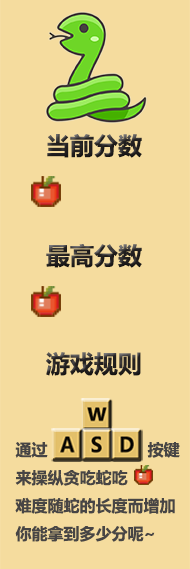
<style>
.page{position:relative;width:190px;height:569px;background:#f5dc9e}
.page>*{position:absolute;margin:0}
.t1{font:24px "MicrosoftYaHei-Bold";color:#242121}
.t2{font:16px "MicrosoftYaHei-Bold";color:#474545}
</style>
<div class="page">
<p class="t1" style="left:47px;top:134px;width:95px;height:24px">当前分数</p>
<p class="t1" style="left:46px;top:244px;width:96px;height:24px">最高分数</p>
<p class="t1" style="left:46px;top:352px;width:95px;height:24px">游戏规则</p>
<p class="t2" style="left:15px;top:442px;width:165px;height:100px">通过                     按键<br>来操纵贪吃蛇吃<br>难度随蛇的长度而增加<br>你能拿到多少分呢~</p>
</div>
